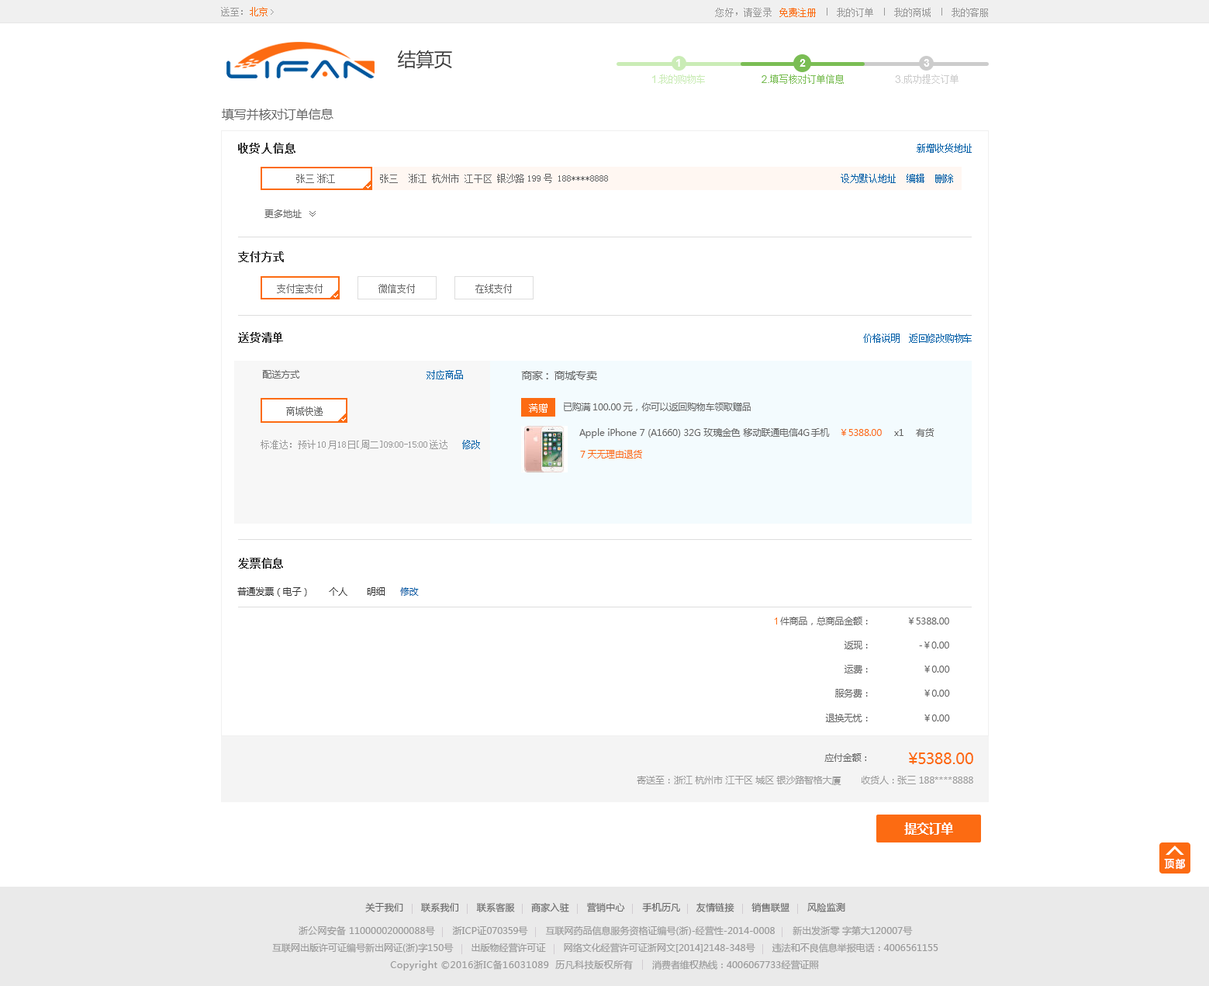
<style>
.page{position:relative;width:1209px;height:986px;background:#ffffff}
.page>*{position:absolute;margin:0}
.t1{font:9.1px "SimSun";letter-spacing:0.02em;color:#999999}
.t2{font:9.1px "SimSun";letter-spacing:0.02em;color:#fc6b12}
.t3{font:9.6px "SimSun";letter-spacing:0.02em;color:#999999}
.t4{font:9.6px "SimSun";letter-spacing:0.02em;color:#fc6b12}
.t5{font:18.6px "MicrosoftYaHei";letter-spacing:-0.02em;color:#393939}
.t6{font:10.9px "Arial-BoldMT";letter-spacing:-0.02em;color:#ffffff}
.t7{font:10.9px "ArialMT";letter-spacing:-0.02em;color:#caecb6}
.t8{font:9.3px "SimSun";color:#caecb6}
.t9{font:10.9px "ArialMT";letter-spacing:-0.02em;color:#7abd54}
.t10{font:9.3px "SimSun";color:#7abd54}
.t11{font:10.9px "ArialMT";letter-spacing:-0.02em;color:#cccccc}
.t12{font:9.3px "SimSun";color:#cccccc}
.t13{font:12.4px "MicrosoftYaHei";color:#666666}
.t14{font:10.9px "SimSun";letter-spacing:0.02em;color:#333333;font-weight:bold}
.t15{font:9.3px "SimSun";color:#005ea7}
.t16{font:9.3px "SimSun";color:#666666}
.t17{font:9.3px "MicrosoftYaHei";color:#666666}
.t18{font:10.9px "SimSun";letter-spacing:-0.02em;color:#333333;font-weight:bold}
.t19{font:10.8px "SimSun";letter-spacing:-0.02em;color:#333333;font-weight:bold}
.t20{font:9.3px "SimSun";letter-spacing:-0.02em;color:#005ea7}
.t21{font:10.9px "MicrosoftYaHei";letter-spacing:-0.02em;color:#666666}
.t22{font:9.3px "SimSun";letter-spacing:0.1em;color:#ffffff}
.t23{font:9.3px "MicrosoftYaHei";letter-spacing:-0.02em;color:#666666}
.t24{font:9.3px "MicrosoftYaHei";letter-spacing:-0.02em;color:#fc6b12}
.t25{font:9.3px "SimSun";color:#999999}
.t26{font:9.3px "MicrosoftYaHei";letter-spacing:-0.02em;color:#333333}
.t27{font:9.3px "MicrosoftYaHei";letter-spacing:-0.02em;color:#005ea7}
.t28{font:9.3px "ArialMT";letter-spacing:-0.02em;color:#fc6b12}
.t29{font:15.5px "MicrosoftYaHei";letter-spacing:-0.02em;color:#fc6b12}
.t30{font:9.3px "MicrosoftYaHei";letter-spacing:-0.02em;color:#999999}
.t31{font:12.4px "MicrosoftYaHei-Bold";letter-spacing:-0.02em;color:#ffffff}
.t32{font:10.2px "MicrosoftYaHei";color:#ffffff;font-weight:bold;scale:0.91 1}
.t33{font:9.3px "MicrosoftYaHei";letter-spacing:0.02em;color:#666666}
.t34{font:9.3px "MicrosoftYaHei";color:#999999}
.t35{font:9.3px "MicrosoftYaHei";letter-spacing:0.02em;color:#999999}
.t36{font:9.3px "MicrosoftYaHei";letter-spacing:0.04em;color:#999999}
</style>
<div class="page">
<p class="t1" style="left:221px;top:7px;width:47px;height:9px">送至：<span class="t2">北京</span></p>
<p class="t3" style="left:715px;top:8px;width:57px;height:9px">您好，请登录</p>
<p class="t4" style="left:780px;top:8px;width:36px;height:9px">免费注册</p>
<p class="t3" style="left:837px;top:8px;width:36px;height:9px">我的订单</p>
<p class="t3" style="left:894px;top:8px;width:37px;height:9px">我的商城</p>
<p class="t3" style="left:952px;top:8px;width:36px;height:9px">我的客服</p>
<p class="t5" style="left:397px;top:50px;width:55px;height:19px">结算页</p>
<p class="t6" style="left:676px;top:59px;width:4px;height:8px">1</p>
<p class="t6" style="left:800px;top:59px;width:6px;height:8px">2</p>
<p class="t6" style="left:924px;top:59px;width:6px;height:8px">3</p>
<p class="t7" style="left:652px;top:75px;width:7px;height:8px">1.</p>
<p class="t8" style="left:659px;top:74px;width:46px;height:10px">我的购物车</p>
<p class="t9" style="left:762px;top:75px;width:8px;height:8px">2.</p>
<p class="t10" style="left:770px;top:74px;width:74px;height:10px">填写核对订单信息</p>
<p class="t11" style="left:895px;top:75px;width:9px;height:8px">3.</p>
<p class="t12" style="left:904px;top:74px;width:55px;height:10px">成功提交订单</p>
<p class="t13" style="left:222px;top:109px;width:112px;height:11px">填写并核对订单信息</p>
<p class="t14" style="left:238px;top:143px;width:58px;height:11px">收货人信息</p>
<p class="t15" style="left:917px;top:144px;width:55px;height:9px">新增收货地址</p>
<p class="t16" style="left:296px;top:174px;width:39px;height:9px">张三 浙江</p>
<p class="t16" style="left:380px;top:174px;width:228px;height:9px">张三  浙江 杭州市 江干区 银沙路199号 188****8888</p>
<p class="t15" style="left:841px;top:174px;width:112px;height:9px">设为默认地址  编辑  删除</p>
<p class="t17" style="left:265px;top:209px;width:37px;height:9px">更多地址</p>
<p class="t18" style="left:238px;top:251px;width:46px;height:11px">支付方式</p>
<p class="t16" style="left:277px;top:284px;width:46px;height:9px">支付宝支付</p>
<p class="t16" style="left:379px;top:284px;width:36px;height:9px">微信支付</p>
<p class="t16" style="left:476px;top:284px;width:36px;height:9px">在线支付</p>
<p class="t19" style="left:238px;top:332px;width:45px;height:11px">送货清单</p>
<p class="t20" style="left:863px;top:334px;width:109px;height:9px">价格说明  返回修改购物车</p>
<p class="t17" style="left:262px;top:370px;width:38px;height:9px">配送方式</p>
<p class="t15" style="left:427px;top:370px;width:36px;height:9px">对应商品</p>
<p class="t21" style="left:521px;top:371px;width:76px;height:9px">商家：商城专卖</p>
<p class="t16" style="left:286px;top:406px;width:37px;height:10px">商城快递</p>
<p class="t22" style="left:529px;top:403px;width:19px;height:10px">满赠</p>
<p class="t23" style="left:564px;top:403px;width:187px;height:8px">已购满100.00元，你可以返回购物车领取赠品</p>
<p class="t23" style="left:579px;top:428px;width:251px;height:10px">Apple iPhone 7 (A1660) 32G 玫瑰金色 移动联通电信4G手机</p>
<p class="t24" style="left:841px;top:429px;width:41px;height:7px">￥5388.00</p>
<p class="t23" style="left:894px;top:429px;width:10px;height:7px">x1</p>
<p class="t23" style="left:916px;top:428px;width:19px;height:9px">有货</p>
<p class="t25" style="left:261px;top:440px;width:187px;height:9px">标准达：预计10月18日［周二］09:00-15:00送达</p>
<p class="t15" style="left:462px;top:440px;width:18px;height:9px">修改</p>
<p class="t24" style="left:580px;top:450px;width:62px;height:8px">7天无理由退货</p>
<p class="t19" style="left:238px;top:558px;width:45px;height:11px">发票信息</p>
<p class="t26" style="left:237px;top:587px;width:148px;height:10px">普通发票（电子）        个人       明细</p>
<p class="t27" style="left:400px;top:587px;width:19px;height:9px">修改</p>
<p class="t28" style="left:775px;top:617px;width:2px;height:7px">1</p>
<p class="t23" style="left:780px;top:617px;width:88px;height:8px">件商品，总商品金额：</p>
<p class="t23" style="left:908px;top:617px;width:42px;height:7px">￥5388.00</p>
<p class="t23" style="left:844px;top:641px;width:24px;height:8px">返现：</p>
<p class="t23" style="left:919px;top:642px;width:31px;height:7px">-￥0.00</p>
<p class="t23" style="left:845px;top:665px;width:23px;height:8px">运费：</p>
<p class="t23" style="left:925px;top:666px;width:25px;height:7px">￥0.00</p>
<p class="t23" style="left:835px;top:689px;width:33px;height:8px">服务费：</p>
<p class="t23" style="left:925px;top:690px;width:25px;height:7px">￥0.00</p>
<p class="t23" style="left:825px;top:714px;width:43px;height:8px">退换无忧：</p>
<p class="t23" style="left:925px;top:714px;width:25px;height:7px">￥0.00</p>
<p class="t23" style="left:825px;top:753px;width:42px;height:9px">应付金额：</p>
<p class="t29" style="left:909px;top:752px;width:65px;height:12px">￥5388.00</p>
<p class="t30" style="left:637px;top:776px;width:337px;height:9px">寄送至： 浙江 杭州市 江干区 城区 银沙路智格大厦       收货人：张三 188****8888</p>
<p class="t31" style="left:905px;top:822px;width:48px;height:13px">提交订单</p>
<p class="t32" style="left:1164px;top:859px;width:22px;height:11px">顶 部</p>
<p class="t33" style="left:365px;top:902px;width:481px;height:10px">关于我们      联系我们      联系客服     商家入驻      营销中心      手机历凡     友情链接      销售联盟      风险监测</p>
<p class="t34" style="left:299px;top:925px;width:614px;height:11px"><span class="t35">浙公网安备 </span>11000002000088<span class="t35">号      浙ICP证</span><span class="t30">070359号     </span>互联网药品信息服务资格证编号(<span class="t35">浙</span>)-经营性-2014-0008      新出发<span class="t35">浙</span>零 字第大120007号</p>
<p class="t34" style="left:272px;top:943px;width:667px;height:10px">互联网出版许可证编号新出网证(<span class="t35">浙</span>)字150号       出版物经营许可证       网络文化经营许可证<span class="t35">浙</span>网文[2014]2148-348号       违法和不良信息举报电话：4006561155</p>
<p class="t36" style="left:390px;top:960px;width:429px;height:10px"><span class="t34"><br><br></span>Copyright ©2016浙IC备16031089  历凡科技版权所有<span class="t34">       消费者维权热线：4006067733经营证照</span></p>
</div>
